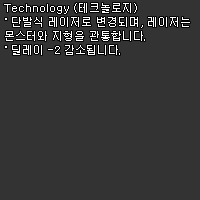
<style>
.page{position:relative;width:200px;height:200px;background:#333333}
.page>*{position:absolute;margin:0}
.t1{font:11px/14px "Dotum";color:#ffffff}
</style>
<div class="page">
<p class="t1" style="left:4px;top:3px;width:186px;height:52px">Technology (테크놀로지)<br>˚ 단발식 레이저로 변경되며, 레이저는<br>몬스터와 지형을 관통합니다.<br>˚ 딜레이 -2 감소됩니다.</p>
</div>
